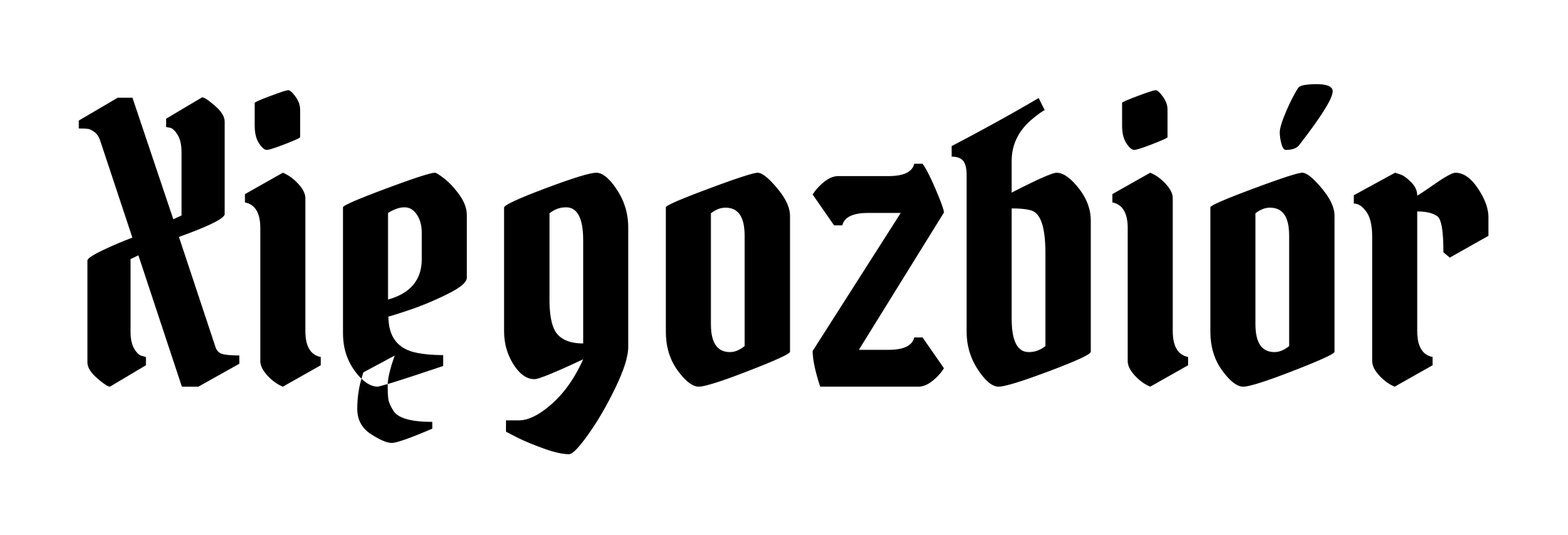
<style>
.page{position:relative;width:1568px;height:535px;background:#ffffff}
.page>*{position:absolute;margin:0}
.t1{font:375.2px "PirataOne-Regular";color:#000000}
</style>
<div class="page">
<p class="t1" style="left:78px;top:84px;width:1411px;height:370px">Xięgozbiór</p>
</div>
